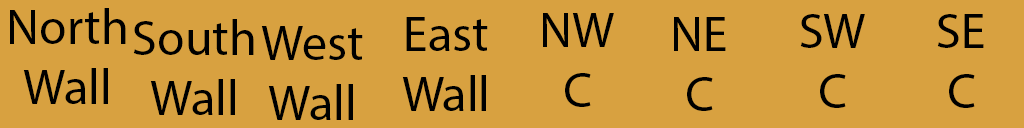
<style>
.page{position:relative;width:1024px;height:128px;background:#d8a140}
.page>*{position:absolute;margin:0}
.t1{font:12px "MyriadPro-Regular";color:#000000}
</style>
<div class="page">
<p class="t1" style="left:10px;top:8px;width:116px;height:96px;text-align:center">North<br>Wall</p>
<p class="t1" style="left:402px;top:17px;width:86px;height:94px;text-align:center">East<br>Wall</p>
<p class="t1" style="left:543px;top:13px;width:71px;height:94px;text-align:center">NW<br>C</p>
<p class="t1" style="left:674px;top:17px;width:52px;height:94px;text-align:center">NE<br>C</p>
<p class="t1" style="left:800px;top:14px;width:65px;height:94px;text-align:center">SW<br>C</p>
<p class="t1" style="left:937px;top:14px;width:47px;height:94px;text-align:center">SE<br>C</p>
<p class="t1" style="left:133px;top:19px;width:121px;height:96px;text-align:center">South<br>Wall</p>
<p class="t1" style="left:261px;top:26px;width:102px;height:94px;text-align:center">West<br>Wall</p>
</div>
